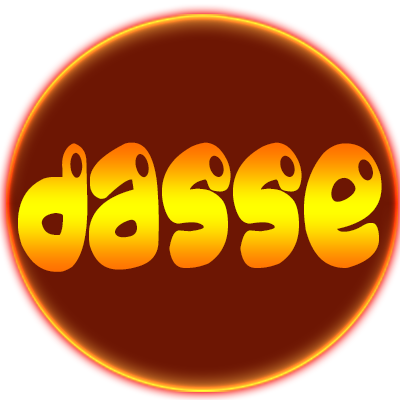
<style>
.page{position:relative;width:400px;height:400px;background:#6d1603}
.page>*{position:absolute;margin:0}
.t1{font:130.7px "JuicyFruity";scale:0.65 1}
</style>
<div class="page">
<p class="t1" style="left:18px;top:142px;width:364px;height:130px">dasse</p>
</div>
